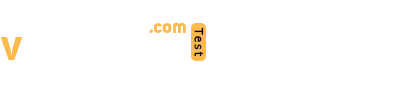
<style>
.page{position:relative;width:400px;height:90px;background:#ffffff}
.page>*{position:absolute;margin:0}
.t1{font:19.3px "Uni-Sans-Bold";color:#fdba4d}
.t2{font:11px "Tahoma";color:#000000;font-weight:bold}
.t3{font:43.3px "Uni-Sans-Bold";color:#fdba4d}
</style>
<div class="page">
<p class="t1" style="left:149px;top:22px;width:37px;height:11px">.com</p>
<p class="t2" style="left:194px;top:27px;width:10px;height:30px;rotate:90deg">Test</p>
<p class="t3" style="left:0px;top:37px;width:23px;height:23px">v</p>
</div>
